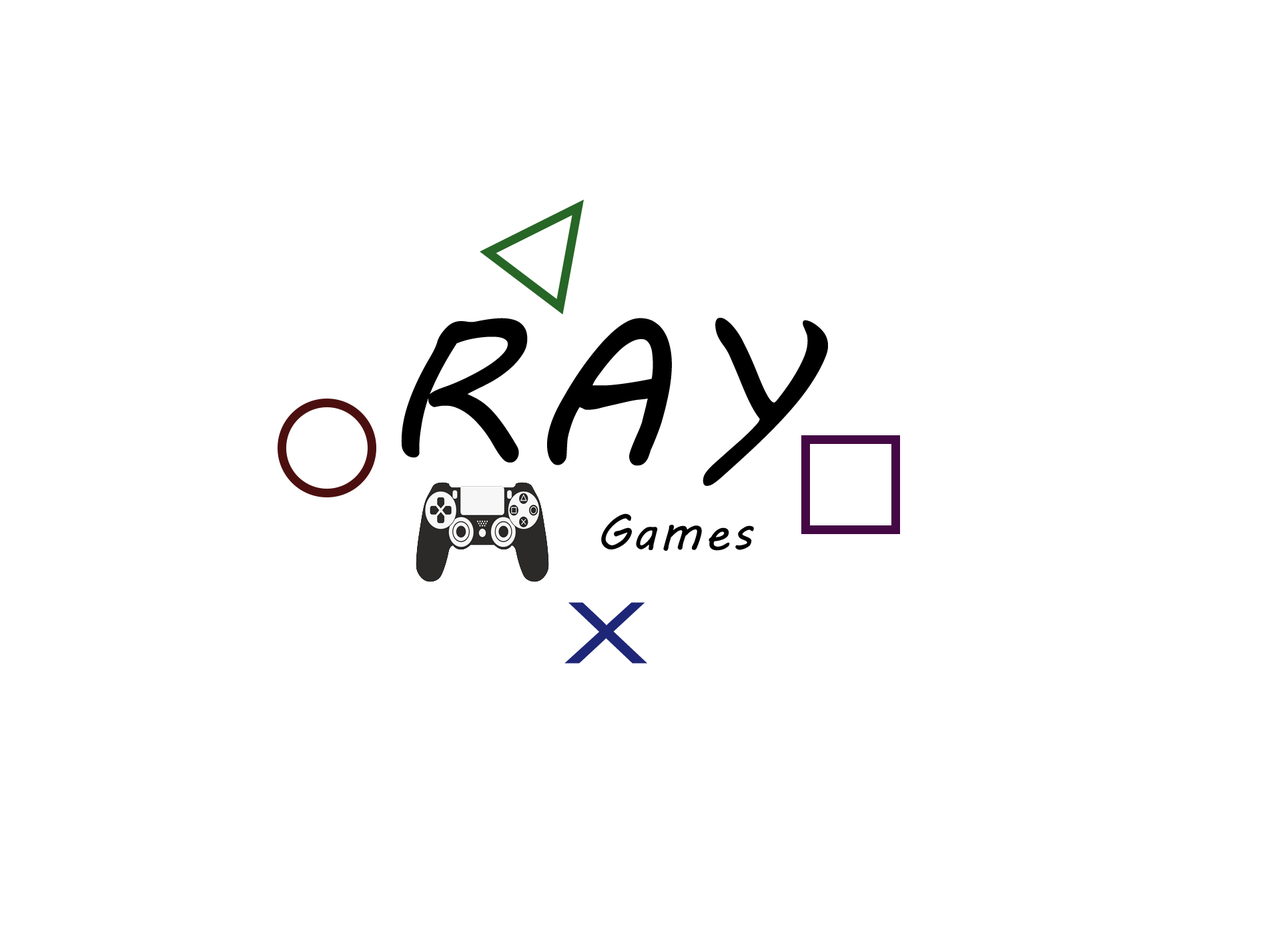
<style>
.page{position:relative;width:1261px;height:946px;background:#ffffff}
.page>*{position:absolute;margin:0}
.t1{font:166.8px "MVBoli";letter-spacing:0.05em;color:#000000}
.t2{font:84.6px "ArialMT";letter-spacing:0.05em;color:#1e2678;scale:1.48 1}
</style>
<div class="page">
<p class="t1" style="left:401px;top:318px;width:427px;height:168px">RAY</p>
<p class="t2" style="left:565px;top:602px;width:82px;height:61px">X</p>
</div>
